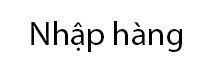
<style>
.page{position:relative;width:200px;height:70px;background:#ffffff}
.page>*{position:absolute;margin:0}
.t1{font:32.9px "MyriadPro-Regular";color:#000000}
</style>
<div class="page">
<p class="t1" style="left:31px;top:21px;width:151px;height:31px">Nhập hàng</p>
</div>
